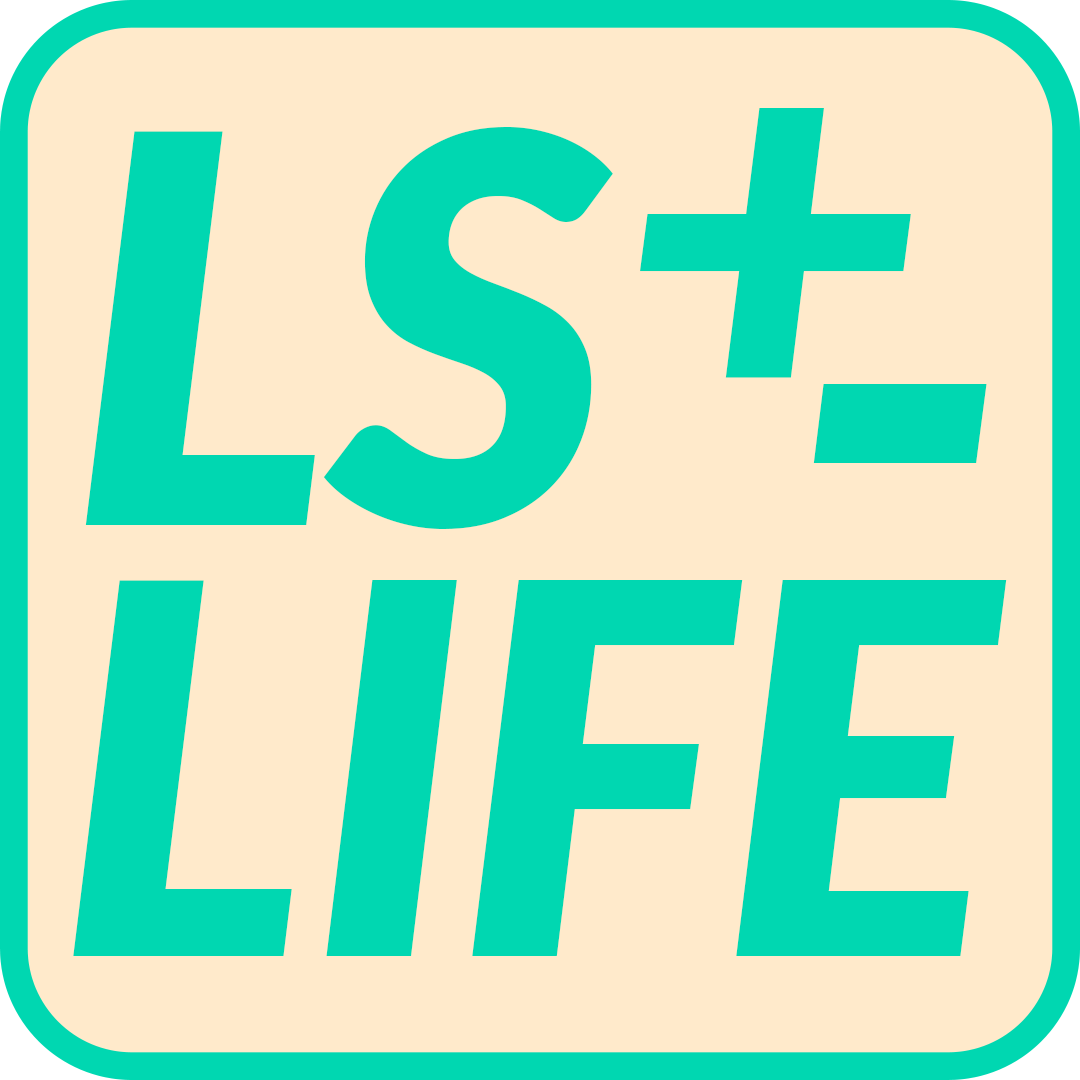
<style>
.page{position:relative;width:1080px;height:1080px;background:#ffeacb}
.page>*{position:absolute;margin:0}
.t1{font:533.2px "Lato-BlackItalic";color:#00d7b1}
.t2{font:539.8px "Lato-BlackItalic";color:#00d7b1}
.t3{font:649.4px "Lato-BlackItalic";color:#00d7b1}
.t4{font:515.5px "Lato-BlackItalic";color:#00d7b1}
</style>
<div class="page">
<p class="t1" style="left:640px;top:108px;width:271px;height:270px">+</p>
<p class="t2" style="left:85px;top:127px;width:528px;height:402px">LS</p>
<p class="t3" style="left:813px;top:384px;width:174px;height:79px">-</p>
<p class="t4" style="left:73px;top:580px;width:934px;height:376px">LIFE</p>
</div>
